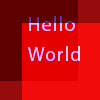
<style>
.page{position:relative;width:100px;height:100px;background:#5f0101}
.page>*{position:absolute;margin:0}
.t1{font:20px/30px "MyriadPro-Regular";letter-spacing:0.05em;color:#d9cafb}
</style>
<div class="page">
<p class="t1" style="left:28px;top:16px;width:52px;height:45px">Hello<br>World</p>
</div>
